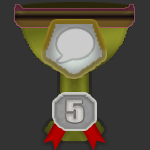
<style>
.page{position:relative;width:150px;height:150px;background:#333333}
.page>*{position:absolute;margin:0}
.t1{font:28.2px "Impact";color:#c3c1bc;scale:1.29 1}
</style>
<div class="page">
<p class="t1" style="left:66px;top:99px;width:18px;height:24px">5</p>
</div>
